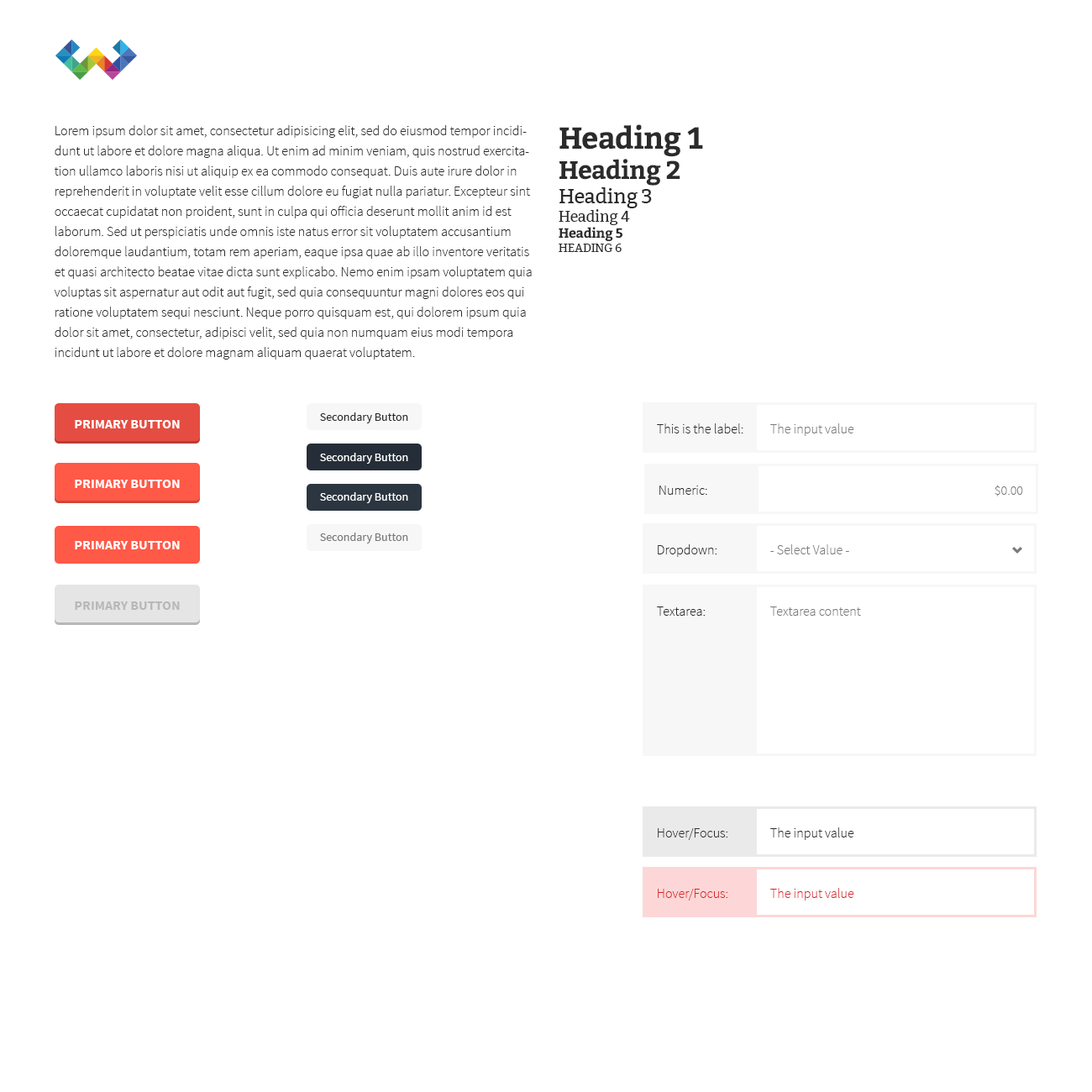
<style>
.page{position:relative;width:1092px;height:1092px;background:#ffffff}
.page>*{position:absolute;margin:0}
.t1{font:13.4px/20.2px "SourceSansPro-Light";color:#2b2b2b}
.t2{font:30.2px "Bitter-Bold";letter-spacing:-0.025em;color:#2b2b2b}
.t3{font:25.2px "Bitter-Bold";letter-spacing:-0.025em;color:#2b2b2b}
.t4{font:20.2px "Bitter-Regular";letter-spacing:-0.025em;color:#2b2b2b}
.t5{font:15.1px "Bitter-Regular";letter-spacing:-0.025em;color:#2b2b2b}
.t6{font:13.4px "Bitter-Bold";letter-spacing:-0.025em;color:#2b2b2b}
.t7{font:11.8px "Bitter-Regular";letter-spacing:-0.025em;color:#2b2b2b;text-transform:uppercase}
.t8{font:11.8px "SourceSansPro-Regular";color:#2b2b2b}
.t9{font:13.4px "SourceSansPro-Bold";color:#ffffff;text-transform:uppercase}
.t10{font:13.4px "SourceSansPro-Light";color:#2b2b2b}
.t11{font:13.4px "SourceSansPro-Light";color:#7a7a7a}
.t12{font:11.8px "SourceSansPro-Regular";color:#ffffff}
.t13{font:11.8px "SourceSansPro-Regular";color:#7a7a7a}
.t14{font:13.4px "SourceSansPro-Bold";color:#b9b8b8;text-transform:uppercase}
.t15{font:13.4px "SourceSansPro-Light";color:#d92328}
</style>
<div class="page">
<p class="t1" style="left:54px;top:125px;width:478px;height:235px">Lorem ipsum dolor sit amet, consectetur adipisicing elit, sed do eiusmod tempor incididunt ut labore et dolore magna aliqua. Ut enim ad minim veniam, quis nostrud exercitation ullamco laboris nisi ut aliquip ex ea commodo consequat. Duis aute irure dolor in reprehenderit in voluptate velit esse cillum dolore eu fugiat nulla pariatur. Excepteur sint occaecat cupidatat non proident, sunt in culpa qui officia deserunt mollit anim id est laborum. Sed ut perspiciatis unde omnis iste natus error sit voluptatem accusantium doloremque laudantium, totam rem aperiam, eaque ipsa quae ab illo inventore veritatis et quasi architecto beatae vitae dicta sunt explicabo. Nemo enim ipsam voluptatem quia voluptas sit aspernatur aut odit aut fugit, sed quia consequuntur magni dolores eos qui ratione voluptatem sequi nesciunt. Neque porro quisquam est, qui dolorem ipsum quia dolor sit amet, consectetur, adipisci velit, sed quia non numquam eius modi tempora incidunt ut labore et dolore magnam aliquam quaerat voluptatem.</p>
<p class="t2" style="left:559px;top:124px;width:144px;height:128px">Heading 1<br><span class="t3">Heading 2<br></span><span class="t4">Heading 3<br></span><span class="t5">Heading 4<br></span><span class="t6">Heading 5<br></span><span class="t7">Heading 6</span></p>
<p class="t8" style="left:320px;top:412px;width:88px;height:11px">Secondary Button</p>
<p class="t9" style="left:75px;top:420px;width:105px;height:8px">Primary Button</p>
<p class="t10" style="left:657px;top:423px;width:86px;height:10px">This is the label:</p>
<p class="t11" style="left:770px;top:423px;width:84px;height:13px">The input value</p>
<p class="t12" style="left:320px;top:453px;width:88px;height:11px">Secondary Button</p>
<p class="t9" style="left:75px;top:480px;width:105px;height:8px">Primary Button</p>
<p class="t10" style="left:659px;top:486px;width:48px;height:9px">Numeric:</p>
<p class="t11" style="left:995px;top:485px;width:28px;height:11px">$0.00</p>
<p class="t12" style="left:320px;top:492px;width:88px;height:11px">Secondary Button</p>
<p class="t13" style="left:320px;top:533px;width:88px;height:10px">Secondary Button</p>
<p class="t9" style="left:75px;top:541px;width:105px;height:8px">Primary Button</p>
<p class="t10" style="left:658px;top:544px;width:59px;height:13px">Dropdown:</p>
<p class="t11" style="left:770px;top:544px;width:79px;height:10px">- Select Value -</p>
<p class="t14" style="left:75px;top:601px;width:105px;height:9px">Primary Button</p>
<p class="t10" style="left:657px;top:606px;width:49px;height:10px">Textarea:</p>
<p class="t11" style="left:770px;top:606px;width:91px;height:10px">Textarea content</p>
<p class="t10" style="left:658px;top:828px;width:70px;height:12px">Hover/Focus:</p>
<p class="t10" style="left:770px;top:827px;width:84px;height:13px">The input value</p>
<p class="t15" style="left:658px;top:889px;width:70px;height:11px">Hover/Focus:</p>
<p class="t15" style="left:770px;top:888px;width:84px;height:12px">The input value</p>
</div>
